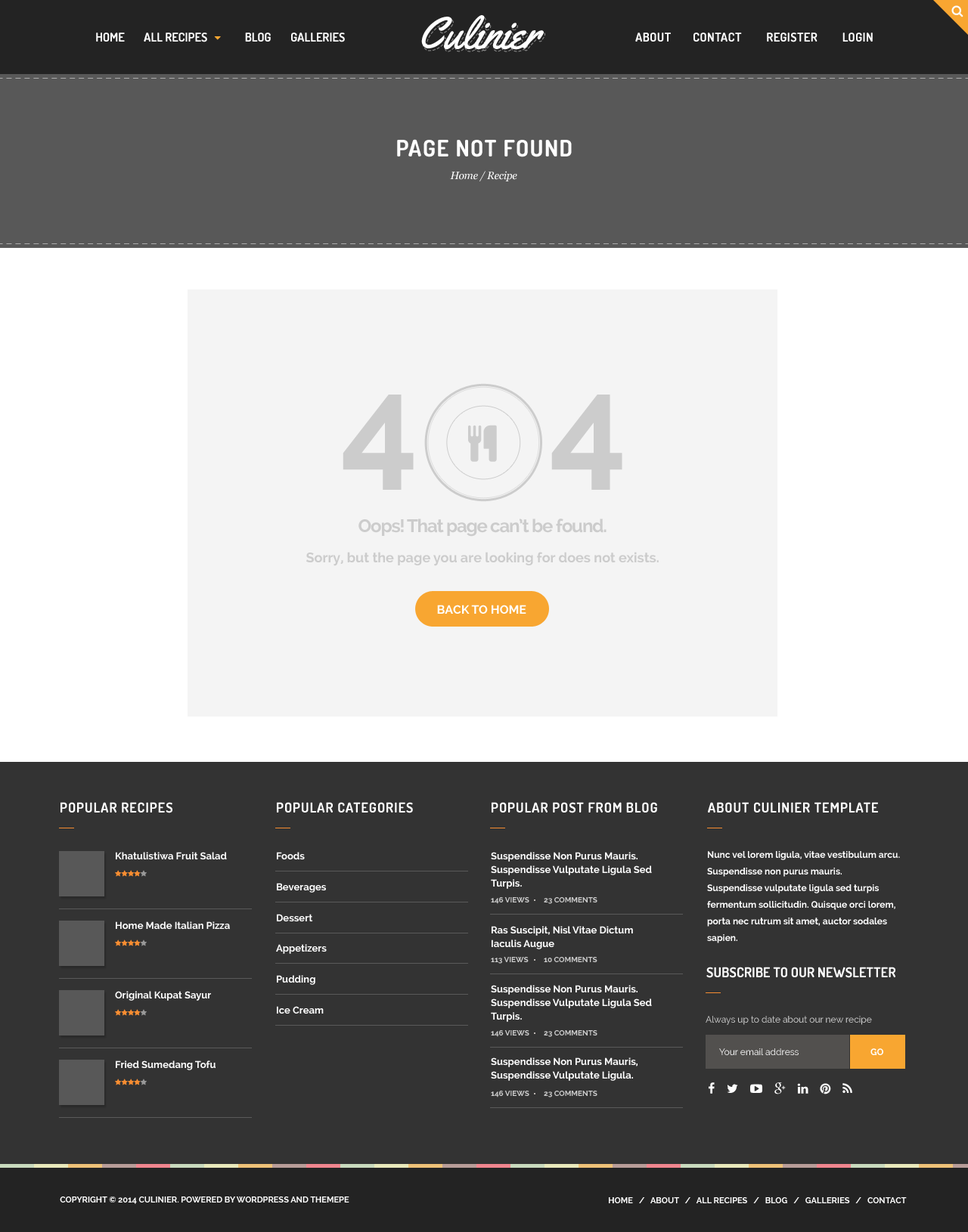
<style>
.page{position:relative;width:968px;height:1232px;background:#333333}
.page>*{position:absolute;margin:0}
.t1{font:45.4px "Yellowtail";color:#ffffff}
.t2{font:12.1px "Dosis-Bold";letter-spacing:0.025em;color:#ffffff;text-transform:uppercase}
.t3{font:22.7px "Dosis-Bold";letter-spacing:0.05em;color:#ffffff;text-transform:uppercase}
.t4{font:10.6px "Georgia-Italic";letter-spacing:-0.025em;color:#ffffff}
.t5{font:136.1px "Raleway-Bold";letter-spacing:-0.03em;color:#cccccc}
.t6{font:18.1px "Raleway-Bold";letter-spacing:-0.05em;color:#cccccc}
.t7{font:13.6px "Raleway-Bold";color:#cccccc}
.t8{font:12.1px "Raleway-Bold";color:#ffffff}
.t9{font:13.6px "Dosis-Bold";letter-spacing:0.05em;color:#ffffff;text-transform:uppercase}
.t10{font:9.8px "Raleway-Bold";color:#ffffff}
.t11{font:9.8px/13.6px "Raleway-Bold";color:#ffffff}
.t12{font:9.1px/16.6px "Raleway-Bold";color:#ffffff}
.t13{font:7.6px "Raleway-Bold";color:#cccccc;text-transform:uppercase}
.t14{font:13.6px "Dosis-Bold";letter-spacing:0.005em;color:#ffffff;text-transform:uppercase}
.t15{font:9.1px "Raleway";color:#dcdcdc}
.t16{font:9.1px "Raleway";color:#ffffff}
.t17{font:9.1px "Raleway-Bold";color:#ffffff}
.t18{font:8.3px "Raleway-Bold";color:#ffffff}
.t19{font:8.3px "Raleway-Bold";color:#ffffff;text-transform:uppercase}
</style>
<div class="page">
<p class="t1" style="left:421px;top:15px;width:123px;height:35px">Culinier</p>
<p class="t2" style="left:635px;top:33px;width:237px;height:9px">ABOUT        CONTACT         Register         login</p>
<p class="t3" style="left:397px;top:139px;width:175px;height:18px">PAGE NOT FOUND</p>
<p class="t4" style="left:450px;top:171px;width:67px;height:10px">Home / Recipe</p>
<p class="t5" style="left:342px;top:395px;width:72px;height:95px">4</p>
<p class="t5" style="left:551px;top:395px;width:71px;height:95px">4</p>
<p class="t6" style="left:358px;top:519px;width:248px;height:18px">Oops! That page can’t be found.</p>
<p class="t7" style="left:306px;top:552px;width:352px;height:14px">Sorry, but the page you are looking for does not exists.</p>
<p class="t8" style="left:437px;top:605px;width:89px;height:9px">BACK TO HOME</p>
<p class="t9" style="left:60px;top:802px;width:112px;height:11px">POPULAR RECIPES</p>
<p class="t9" style="left:277px;top:802px;width:136px;height:11px">POPULAR CATEGORIES</p>
<p class="t9" style="left:491px;top:802px;width:166px;height:11px">POPULAR Post from blog</p>
<p class="t9" style="left:708px;top:802px;width:170px;height:11px">About CULINIER Template</p>
<p class="t10" style="left:116px;top:852px;width:111px;height:8px">Khatulistiwa Fruit Salad</p>
<p class="t10" style="left:277px;top:852px;width:28px;height:8px">Foods</p>
<p class="t11" style="left:491px;top:852px;width:161px;height:37px">Suspendisse Non Purus Mauris. <br>Suspendisse Vulputate Ligula Sed <br>Turpis.</p>
<p class="t12" style="left:707px;top:851px;width:193px;height:92px">Nunc vel lorem ligula, vitae vestibulum arcu. Suspendisse non purus mauris. <br>Suspendisse vulputate ligula sed turpis fermentum sollicitudin. Quisque orci lorem, porta nec rutrum sit amet, auctor sodales sapien.</p>
<p class="t10" style="left:277px;top:883px;width:49px;height:10px">Beverages</p>
<p class="t13" style="left:491px;top:897px;width:38px;height:7px">146 Views</p>
<p class="t13" style="left:544px;top:897px;width:53px;height:7px">23 Comments</p>
<p class="t10" style="left:277px;top:914px;width:36px;height:8px">Dessert</p>
<p class="t10" style="left:116px;top:922px;width:114px;height:8px">Home Made Italian Pizza</p>
<p class="t11" style="left:491px;top:926px;width:142px;height:24px">Ras Suscipit, Nisl Vitae Dictum <br>Iaculis Augue</p>
<p class="t10" style="left:276px;top:944px;width:51px;height:10px">Appetizers</p>
<p class="t13" style="left:491px;top:957px;width:37px;height:7px">113 Views</p>
<p class="t13" style="left:544px;top:957px;width:53px;height:5px">10 Comments</p>
<p class="t10" style="left:277px;top:975px;width:38px;height:10px">Pudding</p>
<p class="t14" style="left:706px;top:967px;width:189px;height:11px">Subscribe to our newsletter</p>
<p class="t11" style="left:491px;top:985px;width:161px;height:37px">Suspendisse Non Purus Mauris. <br>Suspendisse Vulputate Ligula Sed <br>Turpis.</p>
<p class="t10" style="left:115px;top:991px;width:96px;height:10px">Original Kupat Sayur</p>
<p class="t10" style="left:277px;top:1006px;width:47px;height:9px">Ice Cream</p>
<p class="t15" style="left:705px;top:1016px;width:167px;height:9px">Always up to date about our new recipe</p>
<p class="t13" style="left:491px;top:1030px;width:38px;height:7px">146 Views</p>
<p class="t13" style="left:544px;top:1030px;width:53px;height:7px">23 Comments</p>
<p class="t16" style="left:719px;top:1049px;width:79px;height:6px">Your email address</p>
<p class="t17" style="left:870px;top:1049px;width:13px;height:6px">GO</p>
<p class="t10" style="left:116px;top:1061px;width:99px;height:9px">Fried Sumedang Tofu</p>
<p class="t11" style="left:491px;top:1058px;width:146px;height:23px">Suspendisse Non Purus Mauris, <br>Suspendisse Vulputate Ligula.</p>
<p class="t13" style="left:491px;top:1091px;width:38px;height:7px">146 Views</p>
<p class="t13" style="left:544px;top:1091px;width:53px;height:7px">23 Comments</p>
<p class="t18" style="left:60px;top:1197px;width:289px;height:7px">COPYRIGHT © 2014 CULINIER. POWERED BY WORDPRESS AND THEMEPE</p>
<p class="t19" style="left:609px;top:1197px;width:297px;height:7px">Home   /   About   /   All Recipes   /   Blog   /   Galleries   /   Contact</p>
</div>
